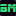
<style>
.page{position:relative;width:16px;height:16px;background:#0d0010}
.page>*{position:absolute;margin:0}
.t1{font:11.7px "BladeRunnerMovieFont";color:#35db7f;scale:0.83 1}
</style>
<div class="page">
<p class="t1" style="left:0px;top:4px;width:16px;height:8px">BM</p>
</div>
